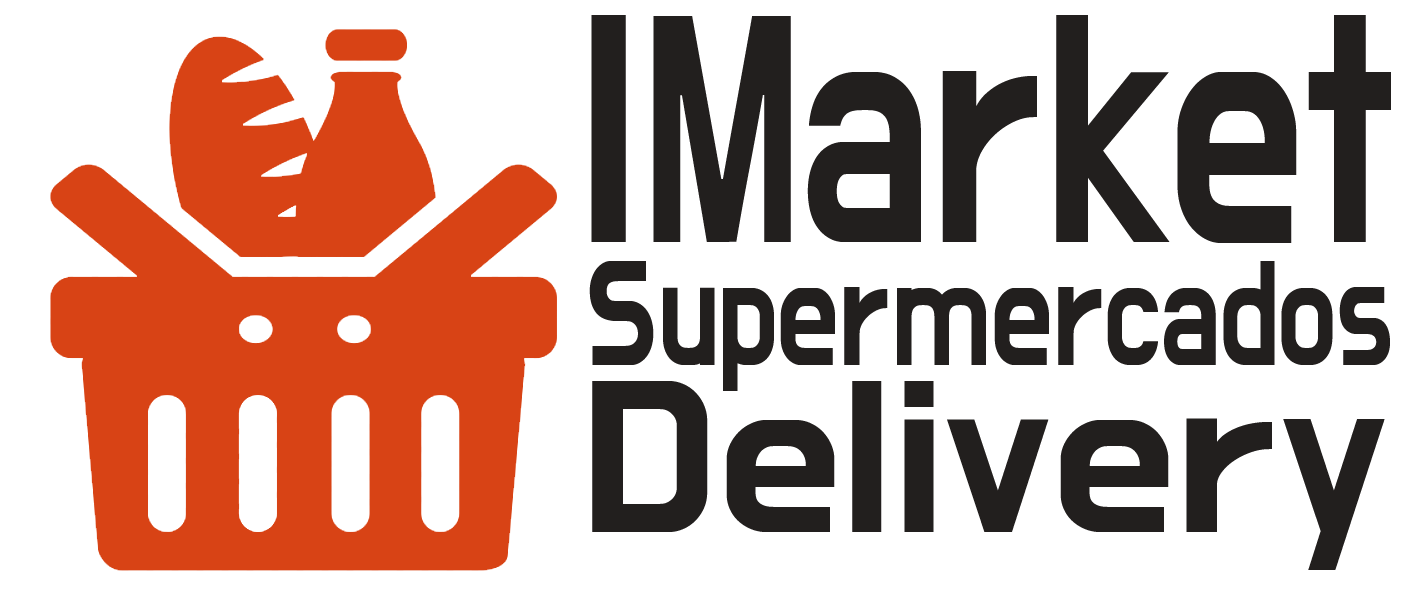
<style>
.page{position:relative;width:1426px;height:600px;background:#ffffff}
.page>*{position:absolute;margin:0}
.t1{font:333.3px "DoHyeon-Regular";color:#221f1e;scale:0.8 1}
.t2{font:152.3px "DoHyeon-Regular";color:#221f1e;scale:0.8 1}
.t3{font:220.7px "DoHyeon-Regular";color:#221f1e;scale:1.1 1}
</style>
<div class="page">
<p class="t1" style="left:591px;top:15px;width:800px;height:228px">IMarket</p>
<p class="t2" style="left:589px;top:261px;width:801px;height:130px">Supermercados</p>
<p class="t3" style="left:592px;top:381px;width:793px;height:189px">Delivery</p>
</div>
